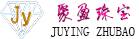
<style>
.page{position:relative;width:139px;height:39px;background:#ffffff}
.page>*{position:absolute;margin:0}
.t1{font:20px "SUXINSHI"}
.t2{font:13px "SimSun";color:#101010}
</style>
<div class="page">
<p class="t1" style="left:57px;top:3px;width:74px;height:20px">聚盈珠宝</p>
<p class="t2" style="left:50px;top:27px;width:85px;height:10px">JUYING ZHUBAO</p>
</div>
